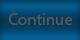
<style>
.page{position:relative;width:80px;height:40px}
.page>*{position:absolute;margin:0}
.t1{font:16.7px "MyriadPro-Regular";color:#595959}
</style>
<div class="page">
<p class="t1" style="left:9px;top:13px;width:63px;height:12px">Continue</p>
</div>
